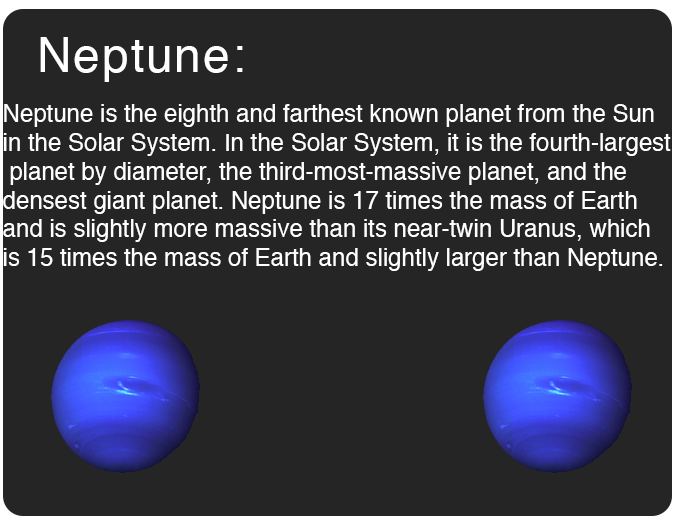
<style>
.page{position:relative;width:675px;height:525px;background:#252525}
.page>*{position:absolute;margin:0}
.t1{font:48px "Helvetica";letter-spacing:0.04em;color:#ffffff}
.t2{font:24px "Helvetica";color:#ffffff}
</style>
<div class="page">
<p class="t1" style="left:40px;top:37px;width:203px;height:45px">Neptune:</p>
<p class="t2" style="left:3px;top:104px;width:668px;height:167px">Neptune is the eighth and farthest known planet from the Sun <br>in the Solar System. In the Solar System, it is the fourth-largest<br> planet by diameter, the third-most-massive planet, and the <br>densest giant planet. Neptune is 17 times the mass of Earth <br>and is slightly more massive than its near-twin Uranus, which <br>is 15 times the mass of Earth and slightly larger than Neptune.</p>
</div>
